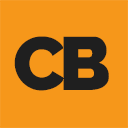
<style>
.page{position:relative;width:128px;height:128px;background:#f6971a}
.page>*{position:absolute;margin:0}
.t1{font:75px "Raleway-Black";letter-spacing:-0.07em;color:#1f1f1f}
</style>
<div class="page">
<p class="t1" style="left:14px;top:36px;width:95px;height:55px">CB</p>
</div>
